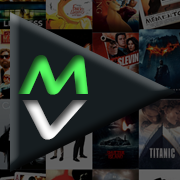
<style>
.page{position:relative;width:180px;height:180px}
.page>*{position:absolute;margin:0}
.t1{font:57.2px "EthnocentricRg-Italic"}
.t2{font:57.9px "EthnocentricRg-Italic"}
</style>
<div class="page">
<p class="t1" style="left:17px;top:55px;width:71px;height:40px">m</p>
<p class="t2" style="left:22px;top:100px;width:66px;height:40px">V</p>
</div>
